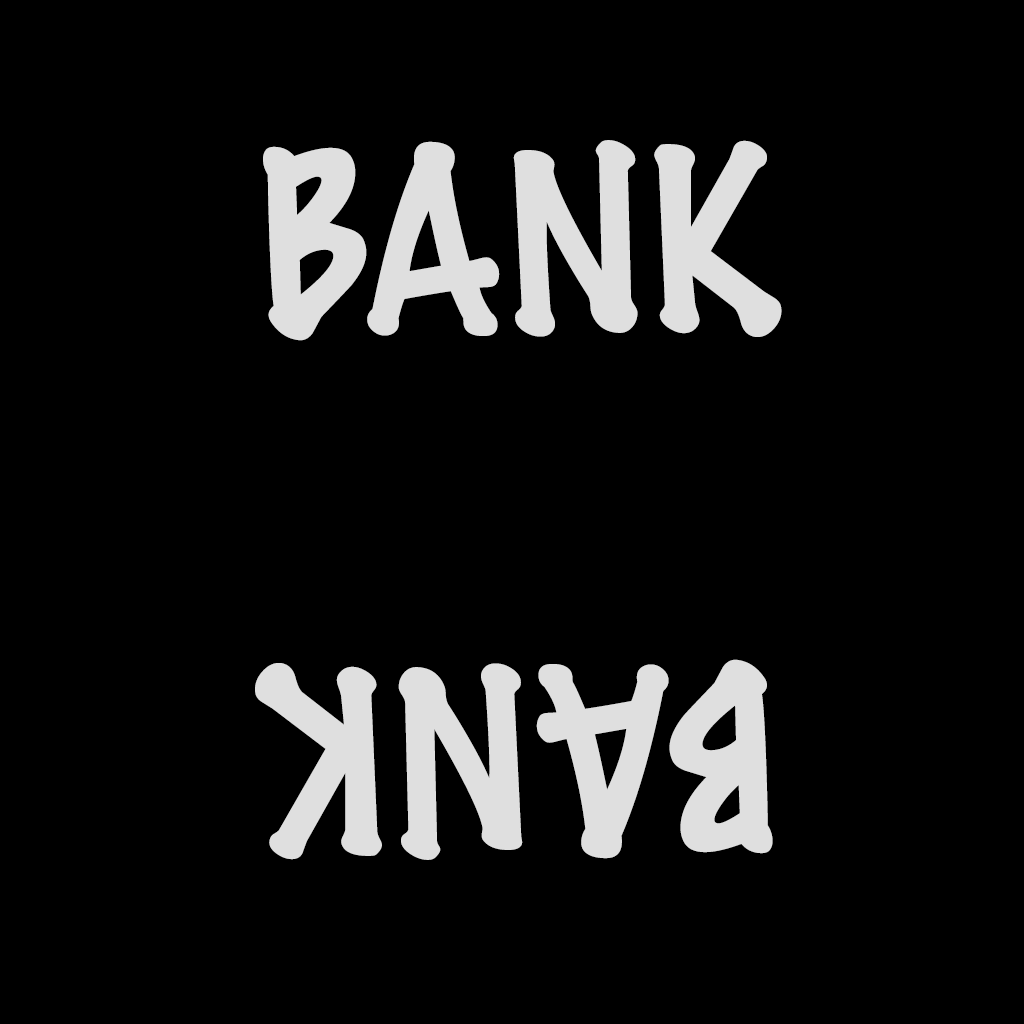
<style>
.page{position:relative;width:1024px;height:1024px;background:#000000}
.page>*{position:absolute;margin:0}
.t1{font:230px "MarkerFelt-Thin";color:#dfdfdf}
</style>
<div class="page">
<p class="t1" style="left:263px;top:140px;width:519px;height:201px">BANK</p>
<p class="t1" style="left:255px;top:659px;width:518px;height:201px;rotate:180deg">BANK</p>
</div>
